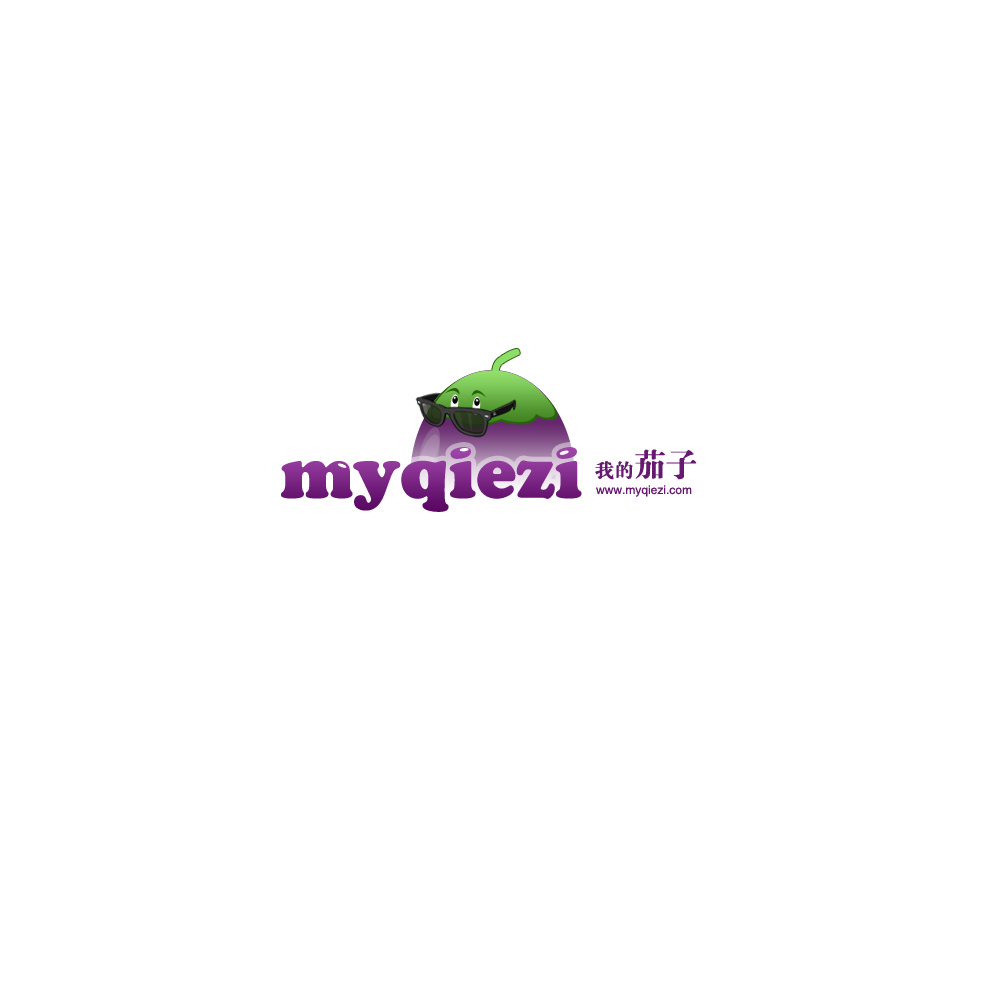
<style>
.page{position:relative;width:1000px;height:1000px;background:#ffffff}
.page>*{position:absolute;margin:0}
.t1{font:72px "CooperBlackStd";color:#7d2786}
.t2{font:32px "FZDBSJW--GB1-0";color:#671870}
.t3{font:19.4px "FZDBSJW--GB1-0";color:#671870}
.t4{font:12px "Helvetica";color:#671870}
</style>
<div class="page">
<p class="t1" style="left:281px;top:447px;width:301px;height:65px">myqiezi</p>
<p class="t2" style="left:635px;top:449px;width:62px;height:31px">茄子</p>
<p class="t3" style="left:595px;top:461px;width:38px;height:19px">我的</p>
<p class="t4" style="left:596px;top:485px;width:96px;height:12px">www.myqiezi.com</p>
</div>
